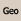
<style>
.page{position:relative;width:21px;height:21px;background:#d9cdc1}
.page>*{position:absolute;margin:0}
.t1{font:9px "Tahoma";color:#000000}
</style>
<div class="page">
<p class="t1" style="left:3px;top:7px;width:16px;height:8px">Geo</p>
</div>
